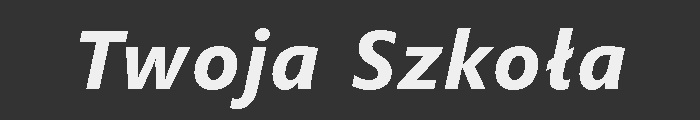
<style>
.page{position:relative;width:700px;height:120px;background:#333333}
.page>*{position:absolute;margin:0}
.t1{font:83.3px "SegoeUI-BoldItalic";letter-spacing:0.05em;color:#efefef}
</style>
<div class="page">
<p class="t1" style="left:80px;top:28px;width:545px;height:81px">Twoja Szkoła</p>
</div>
